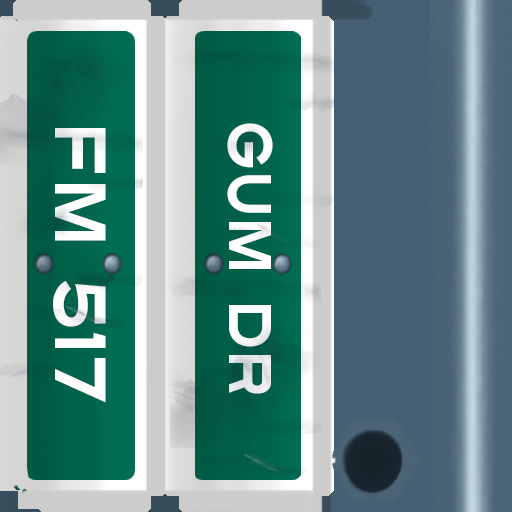
<style>
.page{position:relative;width:512px;height:512px}
.page>*{position:absolute;margin:0}
.t1{font:60px "Turnpike";color:#fefeff;scale:0.75 1}
.t2{font:72px "Turnpike";color:#fefeff;scale:0.75 1}
</style>
<div class="page">
<p class="t1" style="left:227px;top:123px;width:46px;height:271px;rotate:90deg">Gum Dr</p>
<p class="t2" style="left:53px;top:128px;width:53px;height:275px;rotate:90deg">fm 517</p>
</div>
